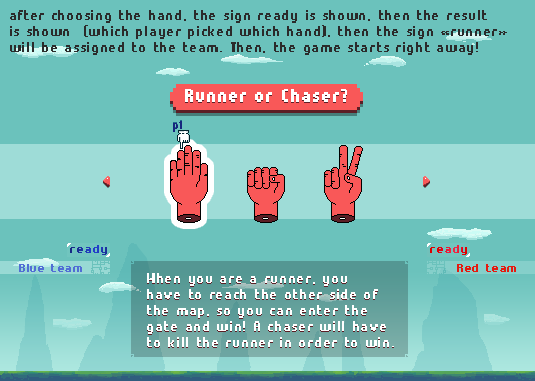
<style>
.page{position:relative;width:535px;height:381px;background:#6bc2bc}
.page>*{position:absolute;margin:0}
.t1{font:14px/16px "Munro";letter-spacing:0.05em;color:#2b2b2b;font-weight:bold}
.t2{font:18px "Munro";letter-spacing:0.05em;color:#ffffff;font-weight:bold}
.t3{font:14px/16px "Munro";letter-spacing:0.05em;color:#ffffff;font-weight:bold}
</style>
<div class="page">
<p class="t1" style="left:10px;top:10px;width:497px;height:45px">after choosing the hand, the sign ready is shown, then the result<br>is shown  (which player picked which hand), then the sign «runner»<br>will be assigned to the team. Then, the game starts right away!</p>
<p class="t2" style="left:185px;top:89px;width:162px;height:13px">Runner or Chaser?</p>
<p class="t2" style="left:185px;top:90px;width:162px;height:13px">Runner or Chaser?</p>
<p class="t3" style="left:147px;top:274px;width:247px;height:74px">When you are a runner, you<br>have to reach the other side of<br>the map, so you can enter the<br>gate and win! A chaser will have <br>to kill the runner in order to win.</p>
<p class="t3" style="left:147px;top:273px;width:247px;height:74px">When you are a runner, you<br>have to reach the other side of<br>the map, so you can enter the<br>gate and win! A chaser will have <br>to kill the runner in order to win.</p>
</div>
